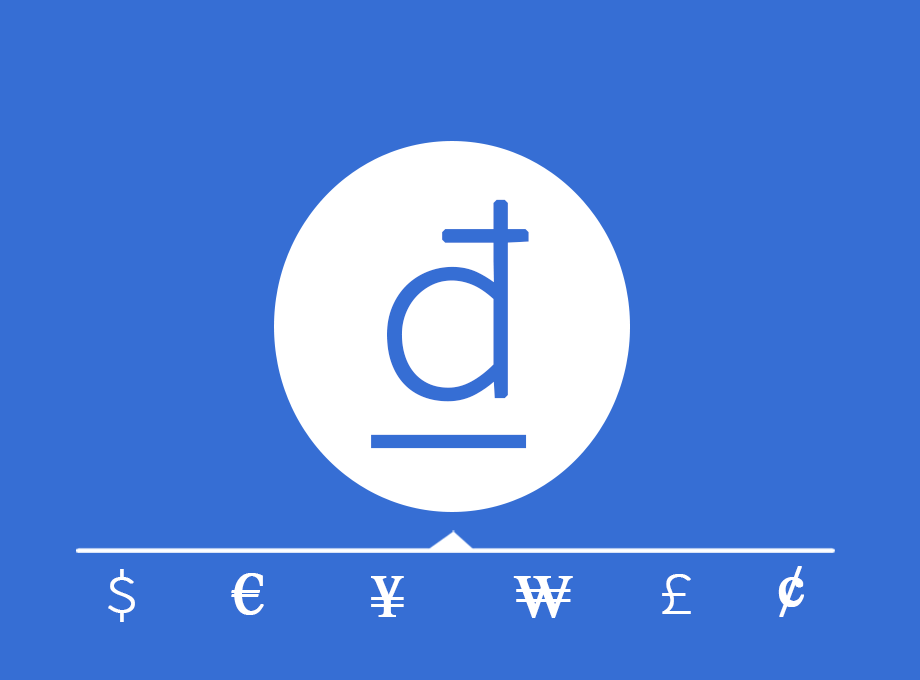
<style>
.page{position:relative;width:920px;height:680px;background:#366ed4}
.page>*{position:absolute;margin:0}
.t1{font:265.7px "SourceCodePro-ExtraLight";letter-spacing:-0.06em;color:#366ed4;font-weight:bold;text-decoration:underline}
.t2{font:59.8px "SourceCodePro-ExtraLight";letter-spacing:-0.06em;color:#ffffff;font-weight:bold}
.t3{font:59.8px "TimesNewRomanPSMT";letter-spacing:-0.06em;color:#ffffff;font-weight:bold}
</style>
<div class="page">
<p class="t1" style="left:371px;top:199px;width:158px;height:250px">đ</p>
<p class="t2" style="left:108px;top:569px;width:27px;height:53px">$</p>
<p class="t3" style="left:778px;top:566px;width:26px;height:51px">¢</p>
<p class="t3" style="left:231px;top:573px;width:33px;height:42px">€</p>
<p class="t3" style="left:371px;top:576px;width:33px;height:41px">¥</p>
<p class="t3" style="left:513px;top:576px;width:60px;height:42px">₩</p>
<p class="t2" style="left:662px;top:574px;width:29px;height:40px">£</p>
</div>
